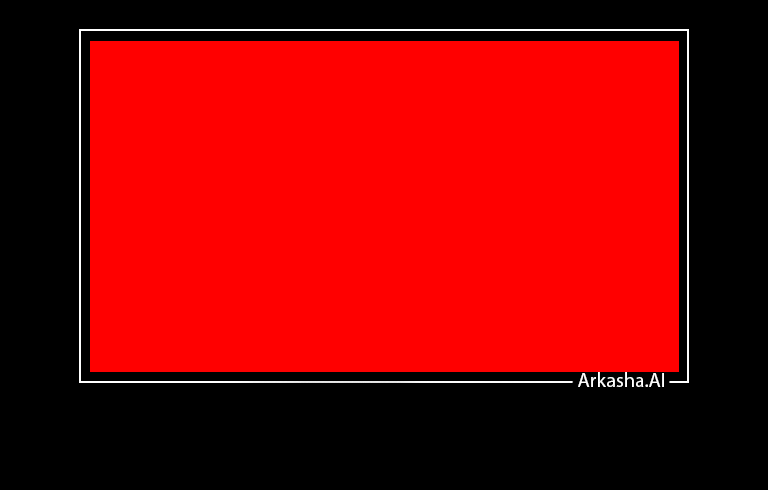
<style>
.page{position:relative;width:768px;height:490px;background:#ff0000}
.page>*{position:absolute;margin:0}
.t1{font:20px "MyriadPro-Regular";color:#ffffff}
</style>
<div class="page">
<p class="t1" style="left:578px;top:372px;width:86px;height:15px">Arkasha.AI</p>
</div>
